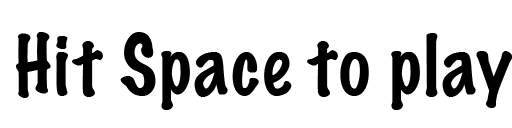
<style>
.page{position:relative;width:512px;height:128px;background:#ffffff}
.page>*{position:absolute;margin:0}
.t1{font:75px "MarkerFelt-Thin";color:#000000}
</style>
<div class="page">
<p class="t1" style="left:16px;top:32px;width:497px;height:78px">Hit Space to play</p>
</div>
